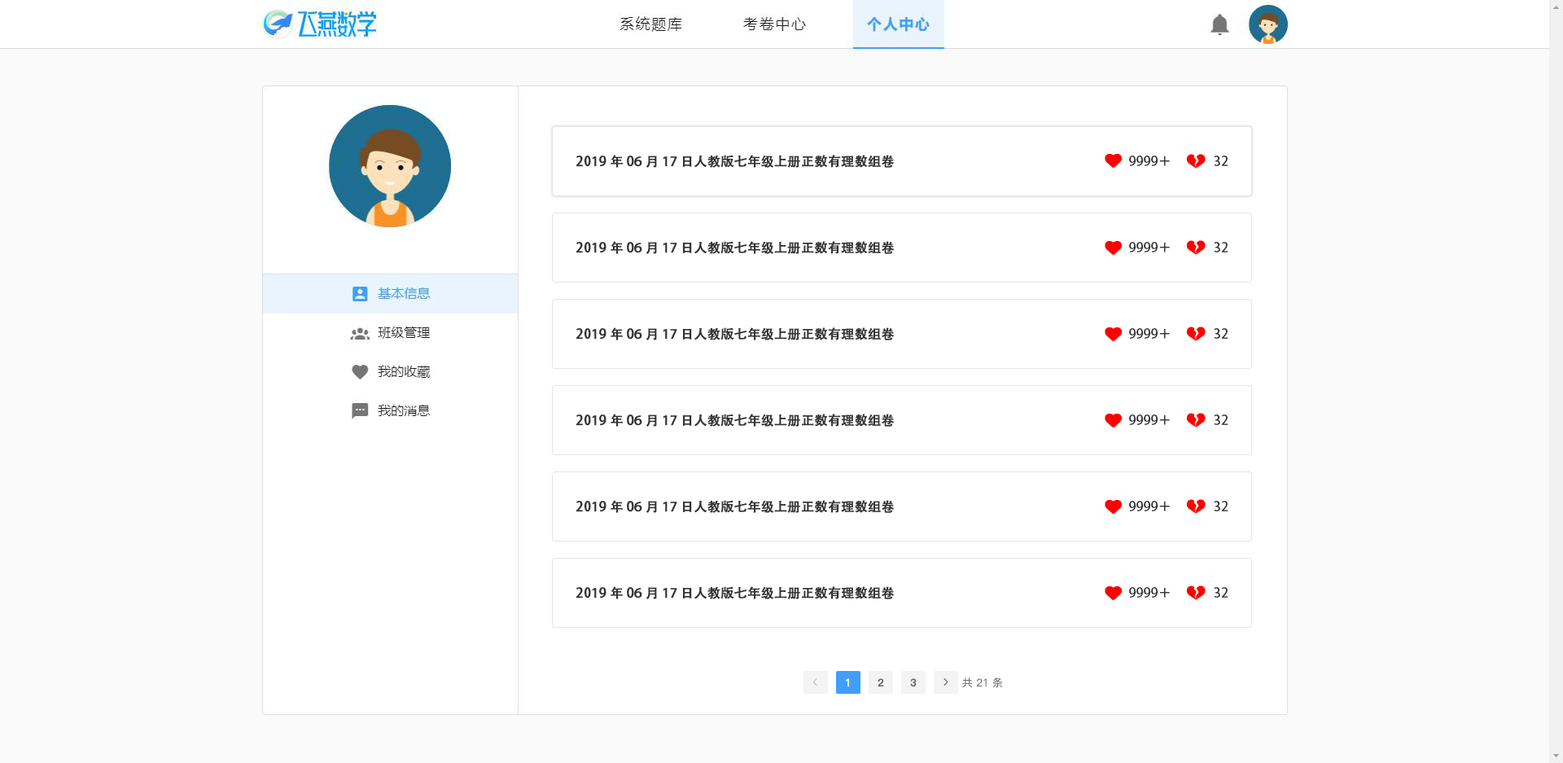
<style>
.page{position:relative;width:1563px;height:763px;background:#ffffff}
.page>*{position:absolute;margin:0}
.t1{font:13px "AdobeHeitiStd-Regular";color:#333333;font-weight:bold}
.t2{font:13px "AdobeHeitiStd-Regular";color:#333333}
</style>
<div class="page">
<p class="t1" style="left:576px;top:155px;width:319px;height:13px">2019年06月17日人教版七年级上册正数有理数组卷</p>
<p class="t2" style="left:1129px;top:155px;width:41px;height:11px">9999＋</p>
<p class="t2" style="left:1214px;top:155px;width:15px;height:11px">32</p>
<p class="t1" style="left:576px;top:241px;width:319px;height:13px">2019年06月17日人教版七年级上册正数有理数组卷</p>
<p class="t2" style="left:1129px;top:242px;width:41px;height:10px">9999＋</p>
<p class="t2" style="left:1214px;top:242px;width:15px;height:10px">32</p>
<p class="t1" style="left:576px;top:327px;width:319px;height:13px">2019年06月17日人教版七年级上册正数有理数组卷</p>
<p class="t2" style="left:1129px;top:328px;width:41px;height:11px">9999＋</p>
<p class="t2" style="left:1214px;top:328px;width:15px;height:11px">32</p>
<p class="t1" style="left:576px;top:414px;width:319px;height:13px">2019年06月17日人教版七年级上册正数有理数组卷</p>
<p class="t2" style="left:1129px;top:414px;width:41px;height:11px">9999＋</p>
<p class="t2" style="left:1214px;top:414px;width:15px;height:11px">32</p>
<p class="t1" style="left:576px;top:500px;width:319px;height:13px">2019年06月17日人教版七年级上册正数有理数组卷</p>
<p class="t2" style="left:1129px;top:501px;width:41px;height:10px">9999＋</p>
<p class="t2" style="left:1214px;top:501px;width:15px;height:10px">32</p>
<p class="t1" style="left:576px;top:586px;width:319px;height:13px">2019年06月17日人教版七年级上册正数有理数组卷</p>
<p class="t2" style="left:1129px;top:587px;width:41px;height:11px">9999＋</p>
<p class="t2" style="left:1214px;top:587px;width:15px;height:11px">32</p>
</div>
